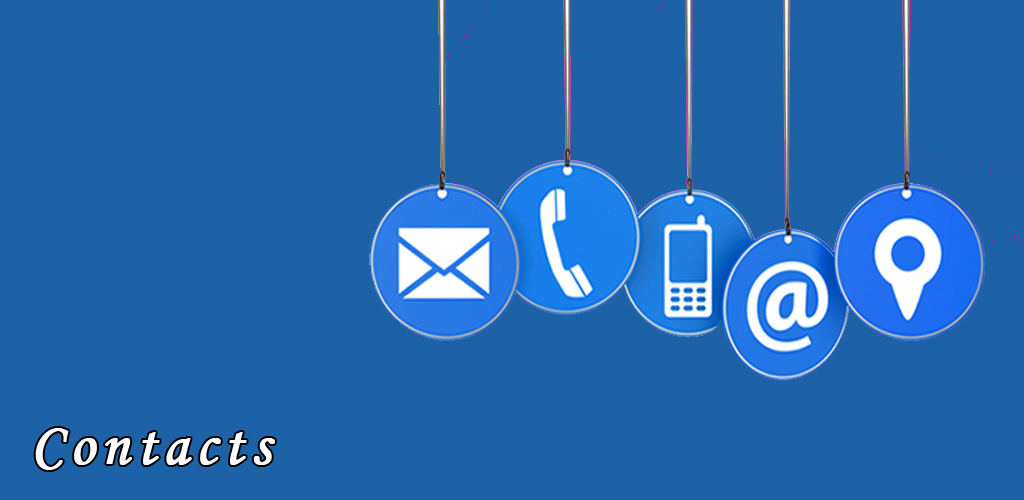
<style>
.page{position:relative;width:1024px;height:500px;background:#1d62a7}
.page>*{position:absolute;margin:0}
.t1{font:60px "MonotypeCorsiva";letter-spacing:0.1em;color:#ffffff;font-weight:bold}
</style>
<div class="page">
<p class="t1" style="left:35px;top:428px;width:240px;height:42px">Contacts</p>
</div>
